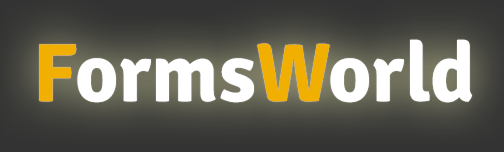
<style>
.page{position:relative;width:504px;height:152px}
.page>*{position:absolute;margin:0}
.t1{font:83.3px "Signika-Bold";color:#ffffff}
.t2{font:83.3px "Signika-Bold";color:#f0af01}
</style>
<div class="page">
<p class="t1" style="left:39px;top:39px;width:433px;height:64px"><span class="t2">F</span>orms<span class="t2">W</span>orld</p>
</div>
